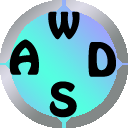
<style>
.page{position:relative;width:128px;height:128px;background:#ffffff}
.page>*{position:absolute;margin:0}
.t1{font:40px "HoboStd";color:#000000;font-weight:bold;scale:1.1 1}
</style>
<div class="page">
<p class="t1" style="left:48px;top:11px;width:32px;height:29px">w</p>
<p class="t1" style="left:9px;top:39px;width:30px;height:36px">A</p>
<p class="t1" style="left:88px;top:42px;width:28px;height:35px">D</p>
<p class="t1" style="left:49px;top:81px;width:28px;height:37px">S</p>
</div>
